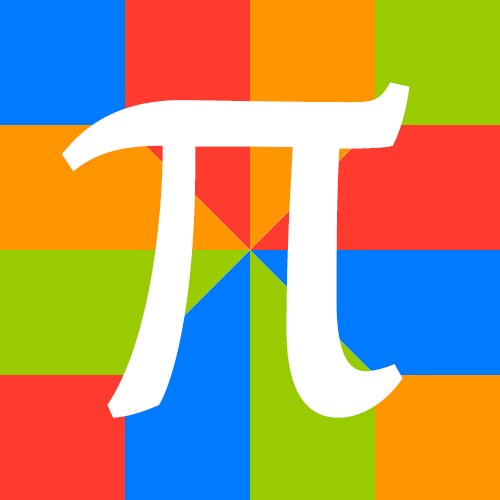
<style>
.page{position:relative;width:500px;height:500px;background:#007aff}
.page>*{position:absolute;margin:0}
.t1{font:700px "MinionPro-Regular";color:#ffffff}
</style>
<div class="page">
<p class="t1" style="left:62px;top:82px;width:348px;height:336px">π</p>
</div>
